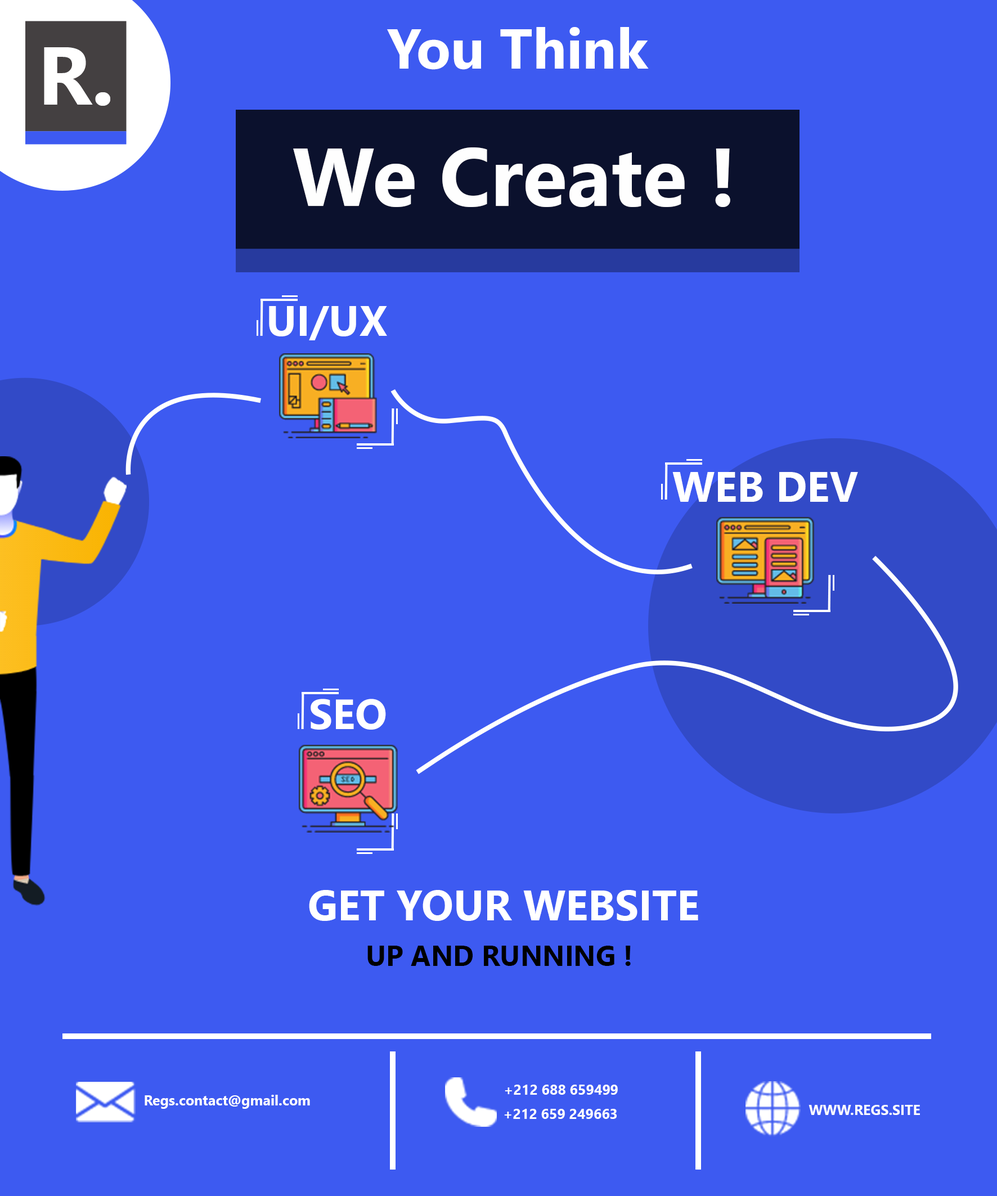
<style>
.page{position:relative;width:997px;height:1196px;background:#3d5af1}
.page>*{position:absolute;margin:0}
.t1{font:56.2px "SegoeUI-Bold";color:#ffffff}
.t2{font:82px "SegoeUI-Bold";color:#fefefe}
.t3{font:42.2px "SegoeUI-Bold";color:#ffffff}
.t4{font:28.1px "SegoeUI-Bold";color:#000000}
.t5{font:14.1px "SegoeUI-Bold";color:#fefefe}
</style>
<div class="page">
<p class="t1" style="left:387px;top:27px;width:262px;height:43px">You Think</p>
<p class="t2" style="left:293px;top:147px;width:437px;height:60px">! We Create</p>
<p class="t3" style="left:269px;top:306px;width:118px;height:34px">UI/UX</p>
<p class="t3" style="left:672px;top:472px;width:186px;height:30px">WEB DEV</p>
<p class="t3" style="left:311px;top:699px;width:75px;height:31px">SEO</p>
<p class="t3" style="left:309px;top:890px;width:389px;height:31px">GET YOUR WEBSITE</p>
<p class="t4" style="left:367px;top:946px;width:264px;height:20px">! UP AND RUNNING</p>
<p class="t5" style="left:505px;top:1085px;width:113px;height:10px">659499 688 +212</p>
<p class="t5" style="left:145px;top:1095px;width:165px;height:14px">Regs.contact@gmail.com</p>
<p class="t5" style="left:504px;top:1109px;width:113px;height:10px">249663 659 +212</p>
<p class="t5" style="left:808px;top:1105px;width:112px;height:10px">WWW.REGS.SITE</p>
</div>
